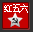
<style>
.page{position:relative;width:33px;height:32px;background:#c50000}
.page>*{position:absolute;margin:0}
.t1{font:10.4px "SimSun";letter-spacing:-0.25em;color:#ffffff}
</style>
<div class="page">
<p class="t1" style="left:4px;top:4px;width:24px;height:9px">红五六</p>
</div>
